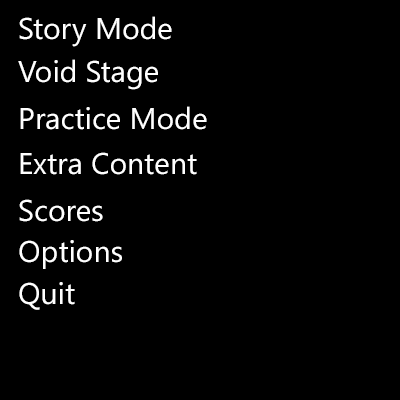
<style>
.page{position:relative;width:400px;height:400px;background:#000000}
.page>*{position:absolute;margin:0}
.t1{font:30px "SegoeUISymbol";color:#ffffff}
</style>
<div class="page">
<p class="t1" style="left:19px;top:16px;width:153px;height:31px">Story Mode</p>
<p class="t1" style="left:18px;top:59px;width:140px;height:31px">Void Stage</p>
<p class="t1" style="left:20px;top:106px;width:187px;height:24px">Practice Mode</p>
<p class="t1" style="left:20px;top:152px;width:177px;height:23px">Extra Content</p>
<p class="t1" style="left:19px;top:199px;width:84px;height:23px">Scores</p>
<p class="t1" style="left:19px;top:240px;width:103px;height:29px">Options</p>
<p class="t1" style="left:19px;top:282px;width:56px;height:28px">Quit</p>
</div>
